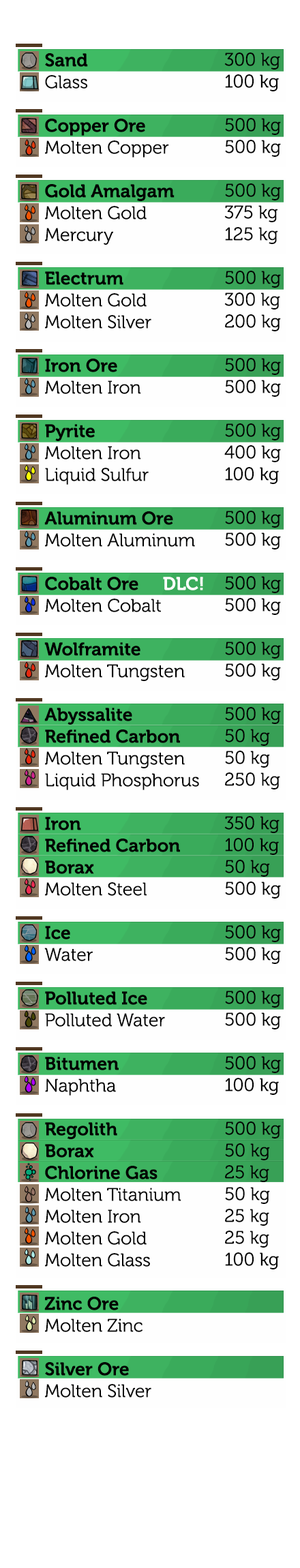
<style>
.page{position:relative;width:300px;height:1568px;background:#ffffff}
.page>*{position:absolute;margin:0}
.t1{font:18.2px "Museo-300";color:#000000}
.t2{font:18.2px "Museo-700";color:#000000}
.t3{font:18.2px "Museo-700";color:#ffffff}
</style>
<div class="page">
<p class="t1" style="left:44px;top:53px;width:159px;height:1345px"><span class="t2">Sand<br></span>Glass<br><br><span class="t2">Copper Ore<br></span>Molten Copper<br><br><span class="t2">Gold Amalgam<br></span>Molten Gold<br>Mercury<br><br><span class="t2">Electrum<br></span>Molten Gold<br>Molten Silver<br><br><span class="t2">Iron Ore<br></span>Molten Iron<br><br><span class="t2">Pyrite<br></span>Molten Iron<br>Liquid Sulfur<br><br><span class="t2">Aluminum Ore<br></span>Molten Aluminum<br><br><span class="t2">Cobalt Ore     </span><span class="t3">DLC!<br></span>Molten Cobalt<br><br><span class="t2">Wolframite<br></span>Molten Tungsten<br><br><span class="t2">Abyssalite<br>Refined Carbon<br></span>Molten Tungsten<br>Liquid Phosphorus<br><br><span class="t2">Iron<br>Refined Carbon<br>Borax<br></span>Molten Steel<br><br><span class="t2">Ice</span><br>Water<br><br><span class="t2">Polluted Ice<br></span>Polluted Water<br><br><span class="t2">Bitumen</span><br>Naphtha<br><br><span class="t2">Regolith<br>Borax<br>Chlorine Gas<br></span>Molten Titanium<br>Molten Iron<br>Molten Gold<br>Molten Glass<br><br><span class="t2">Zinc Ore<br></span>Molten Zinc<br><br><span class="t2">Silver Ore<br></span>Molten Silver</p>
<p class="t1" style="left:224px;top:52px;width:57px;height:1217px">300 kg<br>100 kg<br><br>500 kg<br>500 kg<br><br>500 kg<br>375 kg<br>125 kg<br><br>500 kg<br>300 kg<br>200 kg<br><br>500 kg<br>500 kg<br><br>500 kg<br>400 kg<br>100 kg<br><br>500 kg<br>500 kg<br><br>500 kg<br>500 kg<br><br>500 kg<br>500 kg<br><br>500 kg<br>50 kg<br>50 kg<br>250 kg<br><br>350 kg<br>100 kg<br>50 kg<br>500 kg<br><br>500 kg<br>500 kg<br><br>500 kg<br>500 kg<br><br>500 kg<br>100 kg<br><br>500 kg<br>50 kg<br>25 kg<br>50 kg<br>25 kg<br>25 kg<br>100 kg</p>
</div>
